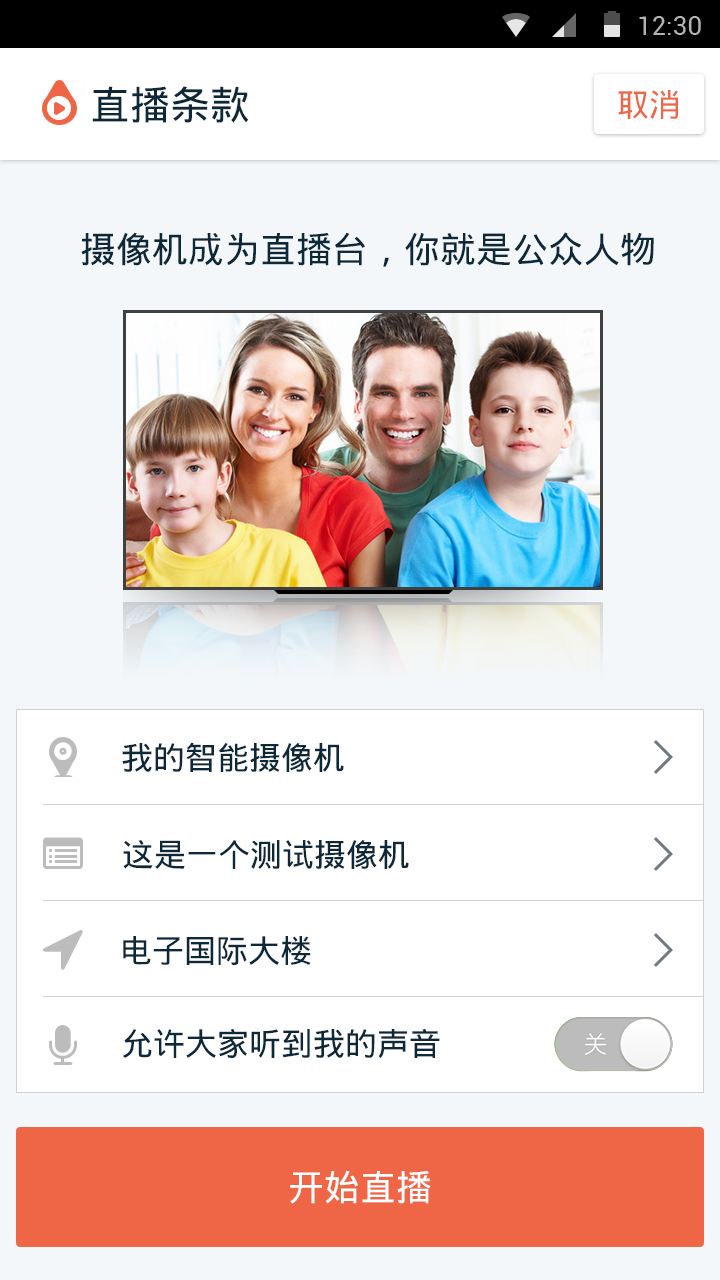
<style>
.page{position:relative;width:720px;height:1280px;background:#ffffff}
.page>*{position:absolute;margin:0}
.t1{font:40px "DroidSansFallback";color:#0c2839}
.t2{font:32px "DroidSansFallback";color:#ee6646}
.t3{font:36px "DroidSansFallback";color:#0c2839}
.t4{font:32px "DroidSansFallback";color:#0c2839}
.t5{font:36px "DroidSansFallback";color:#ffffff}
</style>
<div class="page">
<p class="t1" style="left:92px;top:86px;width:157px;height:37px">直播条款</p>
<p class="t2" style="left:618px;top:90px;width:60px;height:29px">取消</p>
<p class="t3" style="left:81px;top:232px;width:573px;height:35px">摄像机成为直播台，你就是公众人物</p>
<p class="t4" style="left:122px;top:742px;width:222px;height:30px">我的智能摄像机</p>
<p class="t4" style="left:123px;top:840px;width:286px;height:29px">这是一个测试摄像机</p>
<p class="t4" style="left:123px;top:936px;width:188px;height:29px">电子国际大楼</p>
<p class="t4" style="left:122px;top:1029px;width:318px;height:30px">允许大家听到我的声音</p>
<p class="t5" style="left:290px;top:1170px;width:141px;height:34px">开始直播</p>
</div>
